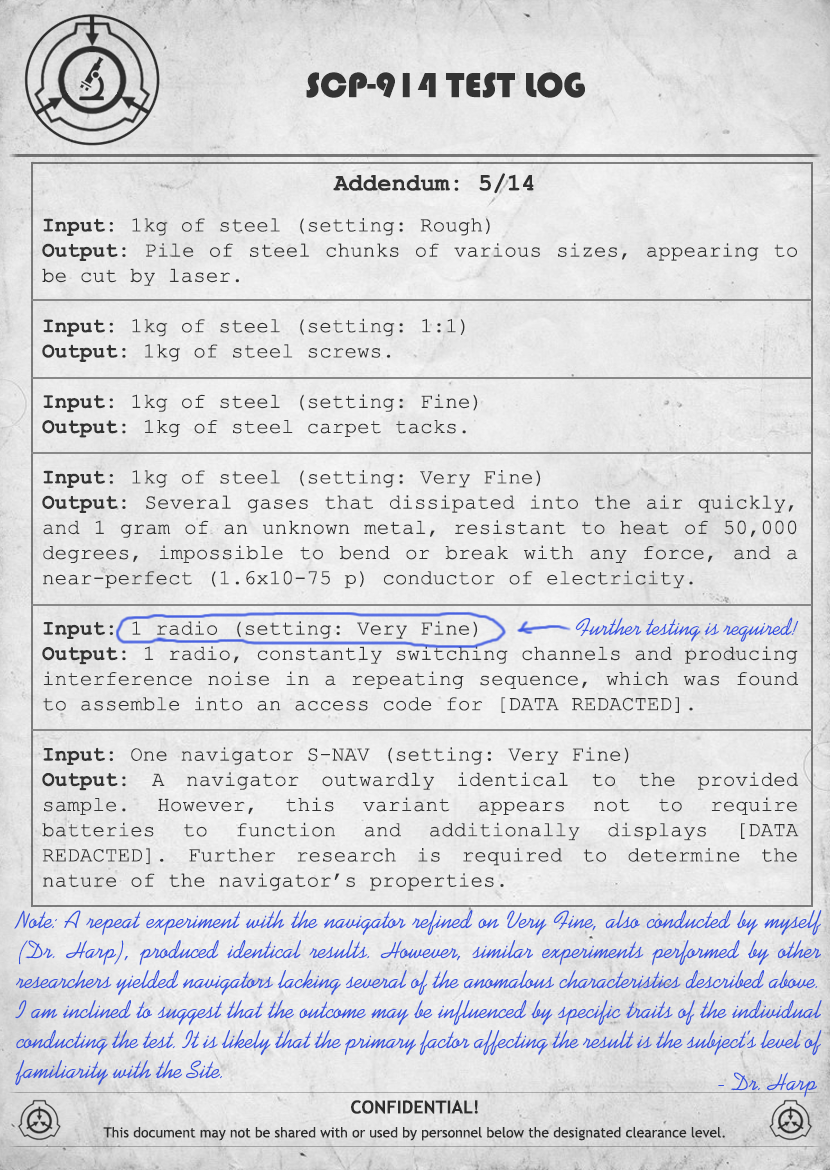
<style>
.page{position:relative;width:830px;height:1170px}
.page>*{position:absolute;margin:0}
.t1{font:36px "Bauhaus93";color:#333333;text-transform:uppercase}
.t2{font:24px "CourierNewPS-BoldMT";color:#333333}
.t3{font:21px "CourierNewPSMT";color:#333333}
.t4{font:21px "CourierNewPS-BoldMT";color:#333333}
.t5{font:24px "Kaufmann";color:#3753e0}
.t6{font:25px "Kaufmann";color:#3652dd}
.t7{font:14px/24px "TrebuchetMS";color:#333333}
.t8{font:18px/24px "TrebuchetMS-Bold";color:#333333}
</style>
<div class="page">
<p class="t1" style="left:306px;top:72px;width:279px;height:26px">SCP-914 Test log</p>
<p class="t2" style="left:333px;top:173px;width:201px;height:21px">Addendum: 5/14</p>
<p class="t3" style="left:42px;top:218px;width:757px;height:673px;text-align:justify"><span class="t4">Input:</span> 1kg of steel (setting: Rough)<br><span class="t4">Output:</span> Pile of steel chunks of various sizes, appearing to be cut by laser.<br><br><span class="t4">Input:</span> 1kg of steel (setting: 1:1)<br><span class="t4">Output: </span>1kg of steel screws.<br><br><span class="t4">Input:</span> 1kg of steel (setting: Fine) <br><span class="t4">Output:</span> 1kg of steel carpet tacks.<br><br><span class="t4">Input:</span> 1kg of steel (setting: Very Fine)<br><span class="t4">Output:</span> Several gases that dissipated into the air quickly, and 1 gram of an unknown metal, resistant to heat of 50,000 degrees, impossible to bend or break with any force, and a near-perfect (1.6x10-75 p) conductor of electricity.<br><br><span class="t4">Input:</span> 1 radio (setting: Very Fine) <br><span class="t4">Output:</span> 1 radio, constantly switching channels and producing interference noise in a repeating sequence, which was found to assemble into an access code for [DATA REDACTED].<br><br><span class="t4">Input: </span>One navigator S-NAV (setting: Very Fine)<br><span class="t4">Output: </span>A navigator outwardly identical to the provided sample. However, this variant appears not to require batteries to function and additionally displays [DATA REDACTED]. Further research is required to determine the nature of the navigator’s properties.</p>
<p class="t5" style="left:575px;top:617px;width:224px;height:25px">Further testing is required!</p>
<p class="t6" style="left:14px;top:910px;width:808px;height:176px;text-align:justify">Note: A repeat experiment with the navigator refined on Very Fine, also conducted by myself (Dr. Harp), produced identical results. However, similar experiments performed by other researchers yielded navigators lacking several of the anomalous characteristics described above. I am inclined to suggest that the outcome may be influenced by specific traits of the individual conducting the test. It is likely that the primary factor affecting the result is the subject’s level of familiarity with the Site.</p>
<p class="t6" style="left:718px;top:1072px;width:100px;height:26px">- Dr. Harp</p>
<p class="t7" style="left:103px;top:1100px;width:622px;height:41px;text-align:center"><span class="t8">CONFIDENTIAL!<br></span>This document may not be shared with or used by personnel below the designated clearance level.</p>
</div>
